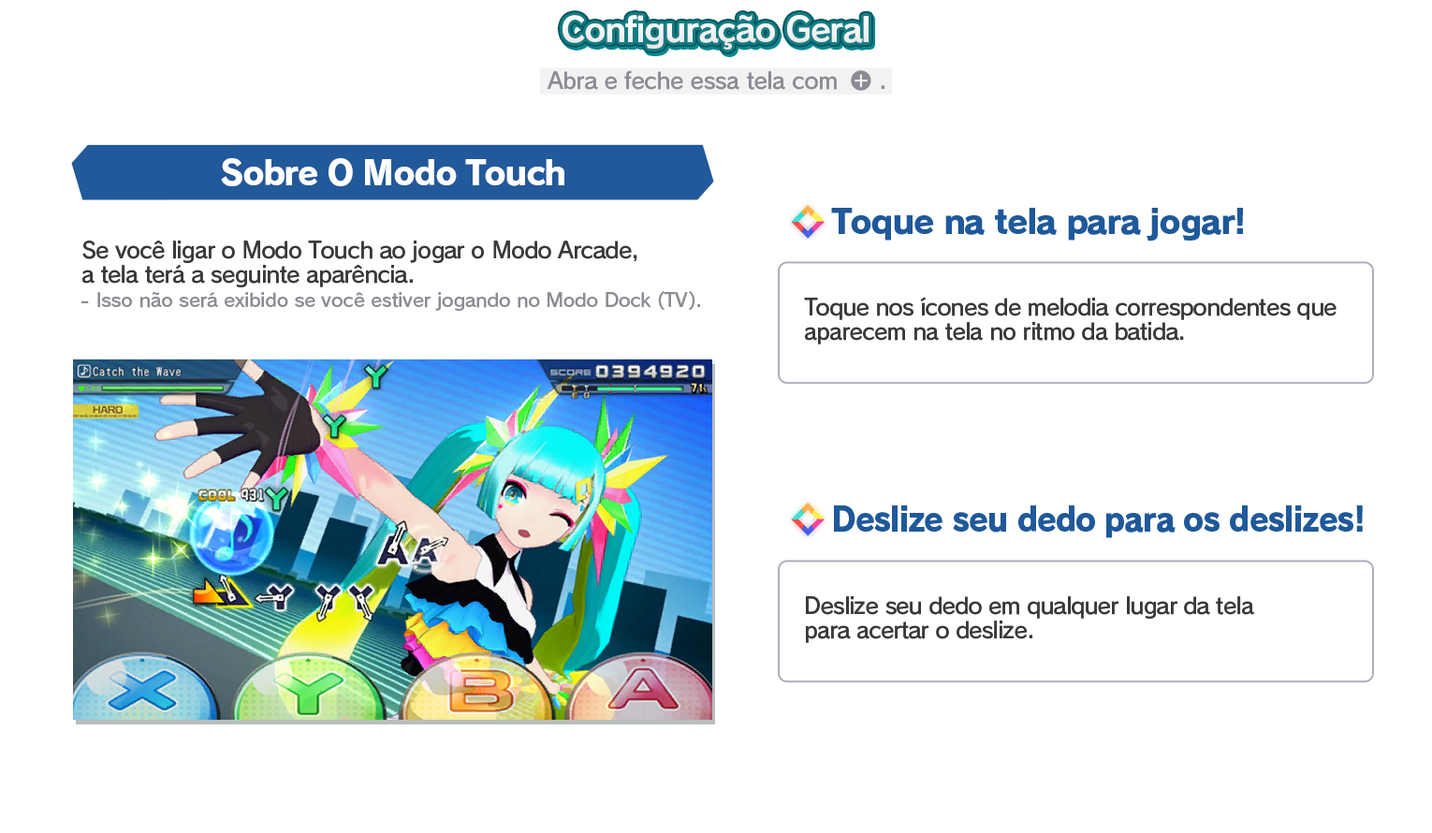
<style>
.page{position:relative;width:1432px;height:833px;background:#ffffff}
.page>*{position:absolute;margin:0}
.t1{font:33.7px "RodinPro-B";letter-spacing:-0.039em;color:#f2f3f3}
.t2{font:22.5px "RodinPro-DB";letter-spacing:-0.025em;color:#8c8b93}
.t3{font:33.7px "RodinPro-EB";letter-spacing:-0.048em;color:#ffffff}
.t4{font:33.7px "RodinPro-EB";letter-spacing:-0.04em;color:#1f599a}
.t5{font:22.5px/23.7px "RodinPro-DB";letter-spacing:-0.04em;color:#383a3a}
.t6{font:18.7px "RodinPro-DB";letter-spacing:-0.014em;color:#8c8b92}
.t7{font:33.7px "RodinPro-EB";letter-spacing:-0.04em;color:#1f599a;scale:0.94 1}
</style>
<div class="page">
<p class="t1" style="left:562px;top:15px;width:306px;height:35px">Configuração Geral</p>
<p class="t2" style="left:547px;top:70px;width:290px;height:20px">Abra e feche essa tela com</p>
<p class="t2" style="left:881px;top:85px;width:3px;height:4px">.</p>
<p class="t3" style="left:221px;top:158px;width:343px;height:28px">Sobre O Modo Touch</p>
<p class="t4" style="left:831px;top:208px;width:412px;height:33px">Toque na tela para jogar!</p>
<p class="t5" style="left:82px;top:240px;width:555px;height:47px">Se você ligar o Modo Touch ao jogar o Modo Arcade,<br>a tela terá a seguinte aparência.</p>
<p class="t6" style="left:81px;top:291px;width:619px;height:20px">- Isso não será exibido se você estiver jogando no Modo Dock (TV).</p>
<p class="t5" style="left:804px;top:297px;width:532px;height:47px">Toque nos ícones de melodia correspondentes que<br>aparecem na tela no ritmo da batida.</p>
<p class="t7" style="left:834px;top:505px;width:529px;height:33px">Deslize seu dedo para os deslizes!</p>
<p class="t5" style="left:806px;top:596px;width:448px;height:47px">Deslize seu dedo em qualquer lugar da tela<br>para acertar o deslize.</p>
</div>
